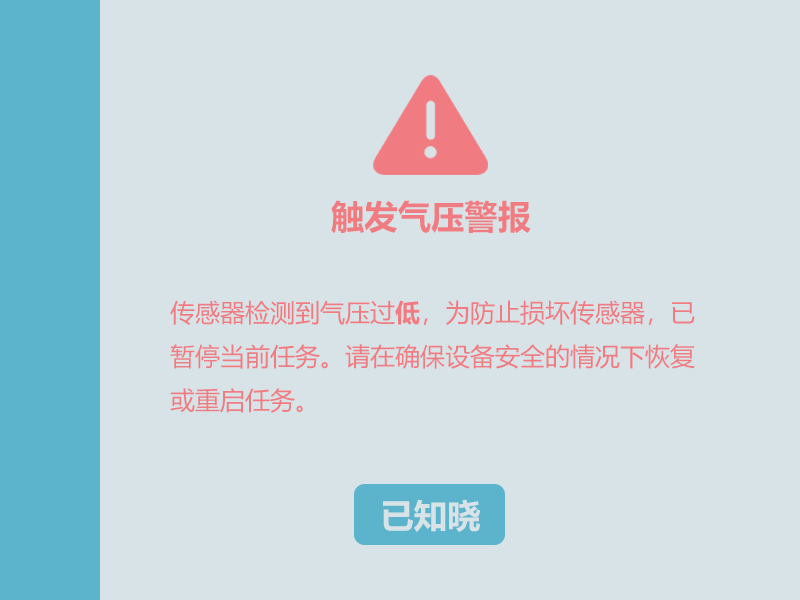
<style>
.page{position:relative;width:800px;height:600px;background:#d8e3e7}
.page>*{position:absolute;margin:0}
.t1{font:33.3px "MicrosoftYaHei-Bold";color:#f07c82}
.t2{font:25px "MicrosoftYaHei";color:#f07c82}
.t3{font:25px "MicrosoftYaHei-Bold";color:#f07c82}
.t4{font:33.3px "MicrosoftYaHei-Bold";color:#d8e3e7}
</style>
<div class="page">
<p class="t1" style="left:331px;top:200px;width:200px;height:34px">触发气压警报</p>
<p class="t2" style="left:170px;top:300px;width:525px;height:113px">传感器检测到气压过<span class="t3">低</span>，为防止损坏传感器，已<br>暂停当前任务。请在确保设备安全的情况下恢复<br>或重启任务。</p>
<p class="t4" style="left:383px;top:499px;width:97px;height:33px">已知晓</p>
</div>
